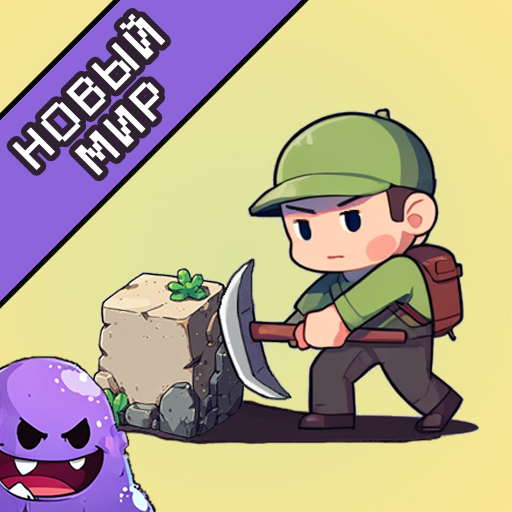
<style>
.page{position:relative;width:512px;height:512px}
.page>*{position:absolute;margin:0}
.t1{font:45px/48px "Small Fonts";letter-spacing:0.14em;color:#ffffff;font-weight:bold;scale:1.16 1}
</style>
<div class="page">
<p class="t1" style="left:12px;top:13px;width:154px;height:163px;text-align:center;rotate:-45deg">НОВЫЙ<br>МИР</p>
</div>
